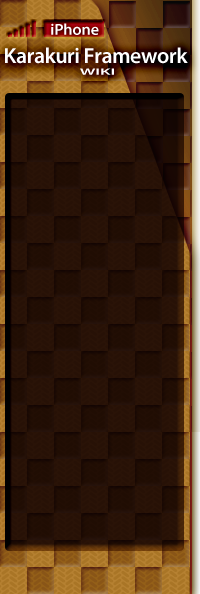
<style>
.page{position:relative;width:200px;height:594px}
.page>*{position:absolute;margin:0}
.t1{font:16px "MyriadPro-Semibold";color:#ffffff}
.t2{font:22px "MyriadPro-Semibold";color:#ffffff}
.t3{font:9px "MyriadPro-Semibold";color:#ffffff;scale:2 1}
</style>
<div class="page">
<p class="t1" style="left:51px;top:23px;width:48px;height:12px">iPhone</p>
<p class="t2" style="left:5px;top:47px;width:183px;height:17px">Karakuri Framework</p>
<p class="t3" style="left:80px;top:68px;width:34px;height:7px">WIKI</p>
</div>
